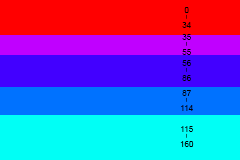
<style>
.page{position:relative;width:240px;height:160px;background:#00fff6}
.page>*{position:absolute;margin:0}
.t1{font:8px "ArialMT";color:#000000}
.t2{font:4px "ArialMT";color:#000000}
</style>
<div class="page">
<p class="t1" style="left:182px;top:7px;width:9px;height:21px;text-align:center">0<br><span class="t2">|<br></span>34</p>
<p class="t1" style="left:182px;top:34px;width:9px;height:21px;text-align:center">35<br><span class="t2">|<br></span>55</p>
<p class="t1" style="left:182px;top:60px;width:9px;height:21px;text-align:center">56<br><span class="t2">|<br></span>86</p>
<p class="t1" style="left:181px;top:90px;width:12px;height:21px;text-align:center">87<br><span class="t2">|<br></span>114</p>
<p class="t1" style="left:180px;top:126px;width:14px;height:21px;text-align:center">115<br><span class="t2">|<br></span>160</p>
</div>
